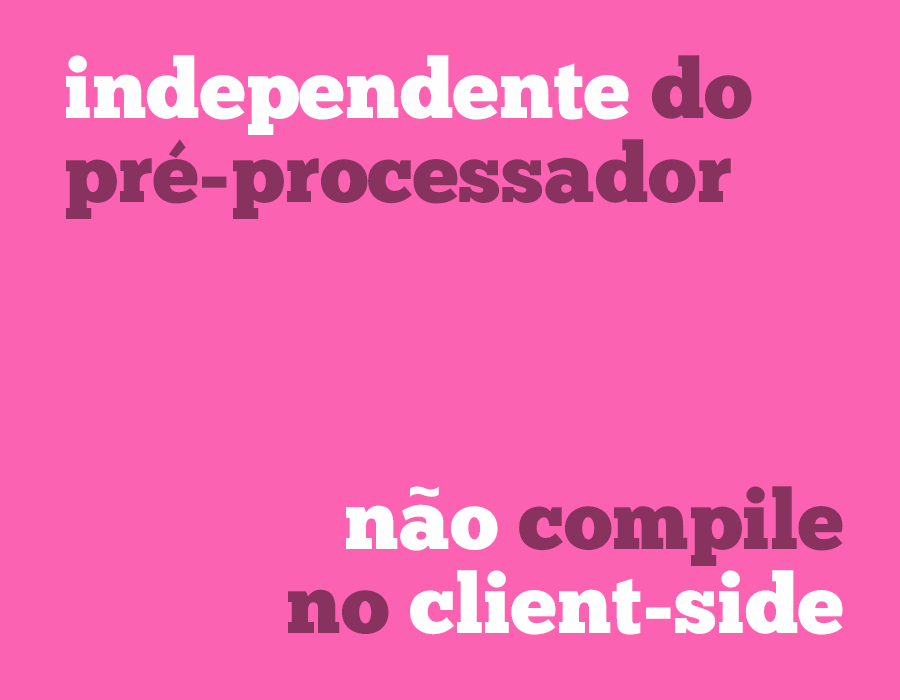
<style>
.page{position:relative;width:900px;height:700px;background:#fc62b2}
.page>*{position:absolute;margin:0}
.t1{font:83.5px/83.5px "ChunkFive-Roman";color:#88335f}
.t2{font:83.5px/83.5px "ChunkFive-Roman";color:#fffeff}
.t3{font:83.5px/83.5px "ChunkFive-Roman";color:#ffffff}
.t4{font:72.7px "ChunkFive-Roman";color:#ffffff}
</style>
<div class="page">
<p class="t1" style="left:66px;top:55px;width:686px;height:164px"><span class="t2">independente</span> do<br>pré-processador</p>
<p class="t3" style="left:288px;top:486px;width:555px;height:149px;text-align:right">nao<span class="t1"> compile<br>no </span>client-side</p>
<p class="t4" style="left:410px;top:486px;width:29px;height:11px">~</p>
</div>
